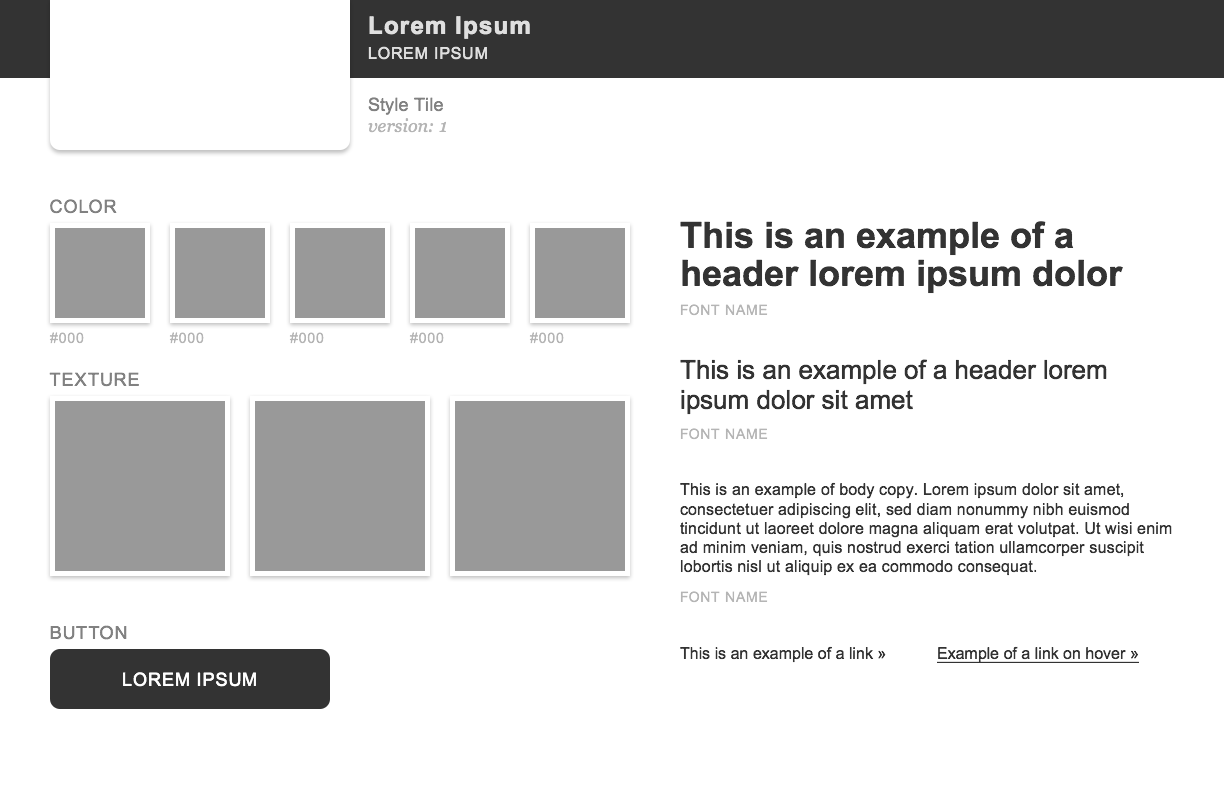
<style>
.page{position:relative;width:1224px;height:792px;background:#ffffff}
.page>*{position:absolute;margin:0}
.t1{font:24px "Arial-BoldMT";letter-spacing:0.05em;color:#dfdfdf}
.t2{font:16px "ArialMT";letter-spacing:0.05em;color:#dfdfdf;text-transform:uppercase}
.t3{font:18px "ArialMT";letter-spacing:0.01em;color:#818181}
.t4{font:18px "Georgia-Italic";letter-spacing:0.01em;color:#b5b5b5}
.t5{font:18px "ArialMT";letter-spacing:0.05em;color:#818181;text-transform:uppercase}
.t6{font:36px/38px "Arial-BoldMT";color:#333333}
.t7{font:14px "ArialMT";letter-spacing:0.05em;color:#b5b5b5;text-transform:uppercase}
.t8{font:26px/30px "ArialMT";color:#333333}
.t9{font:16px "ArialMT";letter-spacing:0.01em;color:#333333}
.t10{font:18px "Helvetica";letter-spacing:0.05em;color:#818181;text-transform:uppercase}
.t11{font:16px "ArialMT";color:#333333}
.t12{font:16px "ArialMT";color:#333333;text-decoration:underline}
.t13{font:18px "ArialMT";letter-spacing:0.05em;color:#ffffff;text-transform:uppercase}
</style>
<div class="page">
<p class="t1" style="left:369px;top:16px;width:161px;height:23px">Lorem Ipsum</p>
<p class="t2" style="left:368px;top:46px;width:119px;height:14px">Lorem Ipsum</p>
<p class="t3" style="left:368px;top:97px;width:75px;height:18px">Style Tile</p>
<p class="t4" style="left:368px;top:118px;width:78px;height:15px">version: 1</p>
<p class="t5" style="left:50px;top:199px;width:67px;height:15px">Color</p>
<p class="t6" style="left:680px;top:221px;width:443px;height:73px">This is an example of a header lorem ipsum dolor</p>
<p class="t7" style="left:680px;top:304px;width:88px;height:12px">Font Name</p>
<p class="t7" style="left:49px;top:332px;width:35px;height:12px">#000</p>
<p class="t7" style="left:169px;top:332px;width:35px;height:12px">#000</p>
<p class="t7" style="left:289px;top:332px;width:35px;height:12px">#000</p>
<p class="t7" style="left:409px;top:332px;width:35px;height:12px">#000</p>
<p class="t7" style="left:529px;top:332px;width:35px;height:12px">#000</p>
<p class="t8" style="left:680px;top:359px;width:427px;height:56px">This is an example of a header lorem ipsum dolor sit amet</p>
<p class="t5" style="left:49px;top:372px;width:90px;height:15px">Texture</p>
<p class="t7" style="left:680px;top:428px;width:88px;height:12px">Font Name</p>
<p class="t9" style="left:680px;top:482px;width:492px;height:94px">This is an example of body copy. Lorem ipsum dolor sit amet, consectetuer adipiscing elit, sed diam nonummy nibh euismod tincidunt ut laoreet dolore magna aliquam erat volutpat. Ut wisi enim ad minim veniam, quis nostrud exerci tation ullamcorper suscipit lobortis nisl ut aliquip ex ea commodo consequat.</p>
<p class="t7" style="left:680px;top:591px;width:88px;height:12px">Font Name</p>
<p class="t10" style="left:50px;top:625px;width:77px;height:15px">Button</p>
<p class="t11" style="left:680px;top:646px;width:206px;height:17px">This is an example of a link »</p>
<p class="t12" style="left:937px;top:646px;width:202px;height:17px">Example of a link on hover »</p>
<p class="t13" style="left:123px;top:672px;width:133px;height:15px">Lorem Ipsum</p>
</div>
